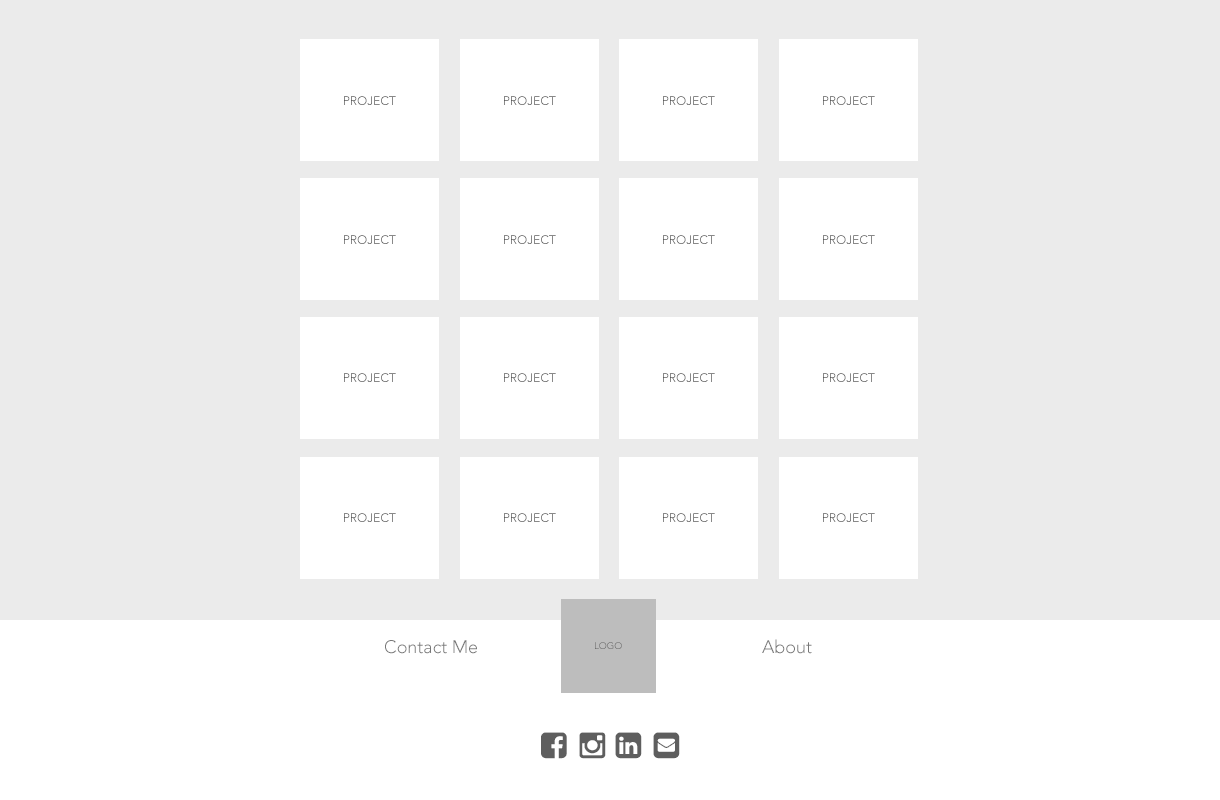
<style>
.page{position:relative;width:1220px;height:800px;background:#ebebeb}
.page>*{position:absolute;margin:0}
.t1{font:12.1px "Avenir-Light";color:#4b4b4b;text-transform:uppercase}
.t2{font:18px "Avenir-Light";color:#777777}
.t3{font:9.5px "Avenir-Light";text-transform:uppercase}
</style>
<div class="page">
<p class="t1" style="left:344px;top:96px;width:52px;height:9px">Project</p>
<p class="t1" style="left:504px;top:96px;width:52px;height:9px">Project</p>
<p class="t1" style="left:663px;top:96px;width:52px;height:9px">Project</p>
<p class="t1" style="left:823px;top:96px;width:52px;height:9px">Project</p>
<p class="t1" style="left:344px;top:235px;width:52px;height:9px">Project</p>
<p class="t1" style="left:504px;top:235px;width:52px;height:9px">Project</p>
<p class="t1" style="left:663px;top:235px;width:52px;height:9px">Project</p>
<p class="t1" style="left:823px;top:235px;width:52px;height:9px">Project</p>
<p class="t1" style="left:344px;top:373px;width:52px;height:9px">Project</p>
<p class="t1" style="left:504px;top:373px;width:52px;height:9px">Project</p>
<p class="t1" style="left:663px;top:373px;width:52px;height:9px">Project</p>
<p class="t1" style="left:823px;top:373px;width:52px;height:9px">Project</p>
<p class="t1" style="left:344px;top:513px;width:52px;height:9px">Project</p>
<p class="t1" style="left:504px;top:513px;width:52px;height:9px">Project</p>
<p class="t1" style="left:663px;top:513px;width:52px;height:9px">Project</p>
<p class="t1" style="left:823px;top:513px;width:52px;height:9px">Project</p>
<p class="t2" style="left:385px;top:640px;width:92px;height:14px">Contact Me</p>
<p class="t2" style="left:762px;top:639px;width:50px;height:15px">About</p>
<p class="t3" style="left:595px;top:642px;width:27px;height:7px">Logo</p>
</div>
